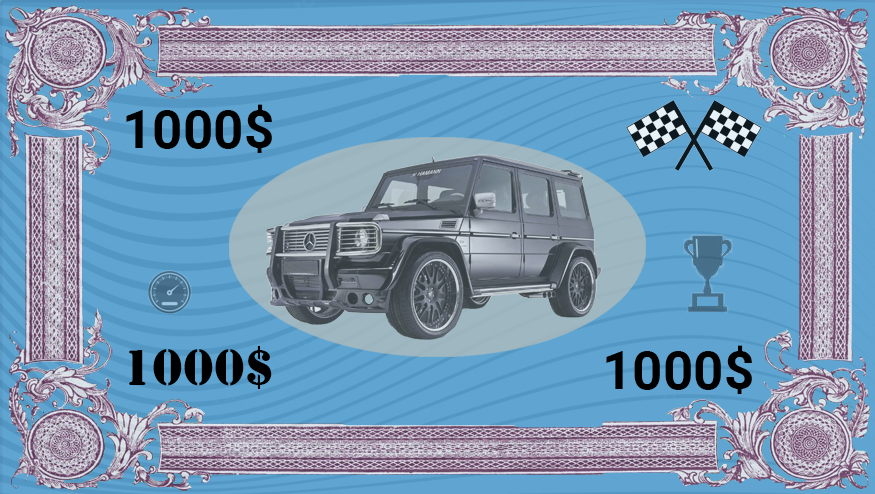
<style>
.page{position:relative;width:875px;height:494px;background:#60a5d1}
.page>*{position:absolute;margin:0}
.t1{font:53.3px "Roboto-Bold";color:#000000}
.t2{font:53.3px "Stencil";color:#000000}
</style>
<div class="page">
<p class="t1" style="left:126px;top:104px;width:146px;height:49px">1000$</p>
<p class="t2" style="left:129px;top:346px;width:143px;height:43px">1000$</p>
<p class="t1" style="left:606px;top:345px;width:146px;height:49px">1000$</p>
</div>
